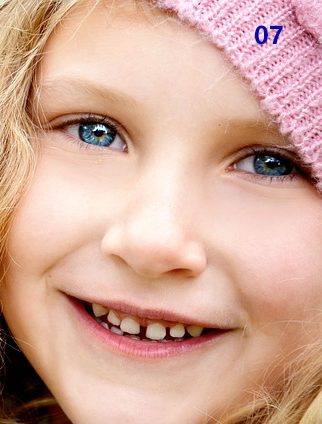
<style>
.page{position:relative;width:322px;height:424px}
.page>*{position:absolute;margin:0}
.t1{font:24px "MicrosoftYaHeiUI-Bold";color:#0509a9}
</style>
<div class="page">
<p class="t1" style="left:255px;top:25px;width:28px;height:20px">07</p>
</div>
